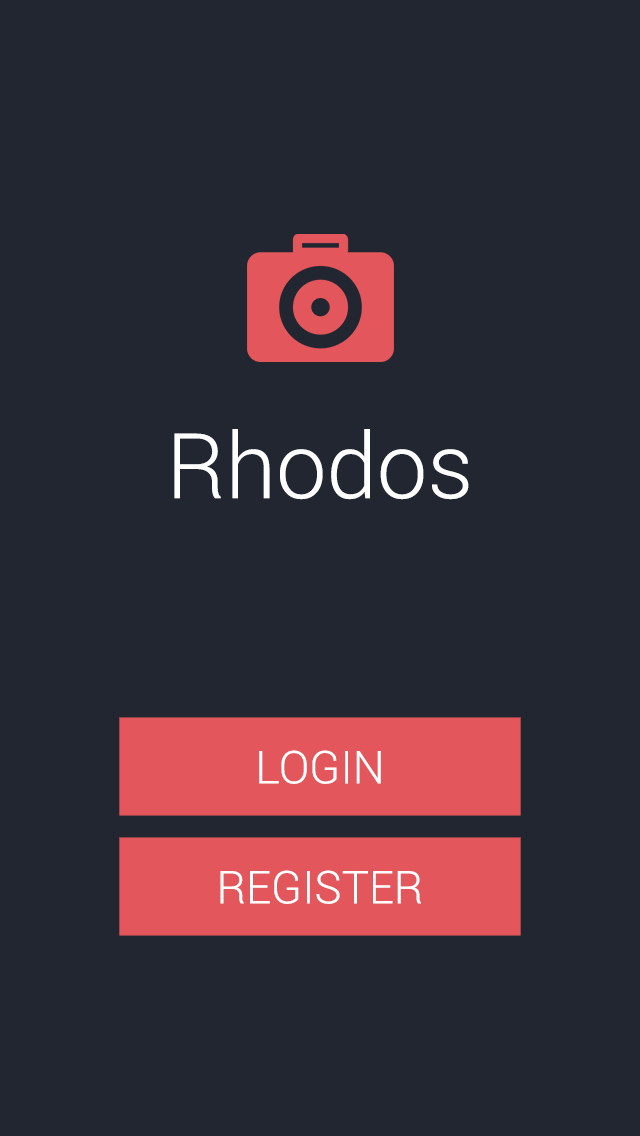
<style>
.page{position:relative;width:640px;height:1136px;background:#222631}
.page>*{position:absolute;margin:0}
.t1{font:90.6px "Roboto-Light";color:#ffffff}
.t2{font:45.3px "Roboto-Light";color:#ffffff}
</style>
<div class="page">
<p class="t1" style="left:174px;top:429px;width:295px;height:71px">Rhodos</p>
<p class="t2" style="left:259px;top:750px;width:122px;height:34px">LOGIN</p>
<p class="t2" style="left:220px;top:870px;width:201px;height:34px">REGISTER</p>
</div>
